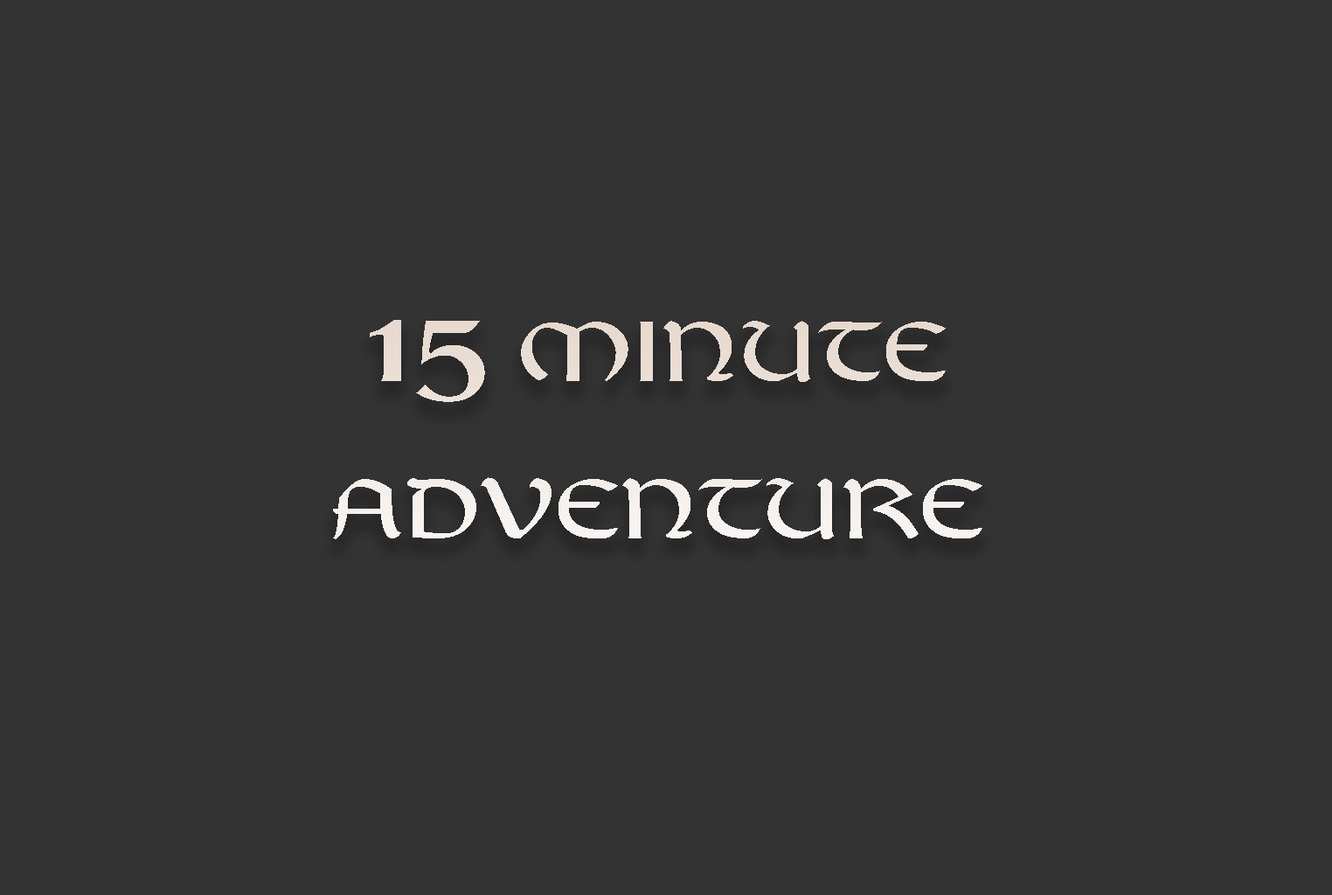
<style>
.page{position:relative;width:1332px;height:895px;background:#333333}
.page>*{position:absolute;margin:0}
.t1{font:87.8px "Balgruf";text-transform:uppercase;scale:1.21 1}
.t2{font:131.8px "Balgruf";text-transform:uppercase;scale:1.21 1}
</style>
<div class="page">
<p class="t1" style="left:333px;top:320px;width:650px;height:219px;text-align:center"><span class="t2">15</span> minute <br>adventure</p>
</div>
